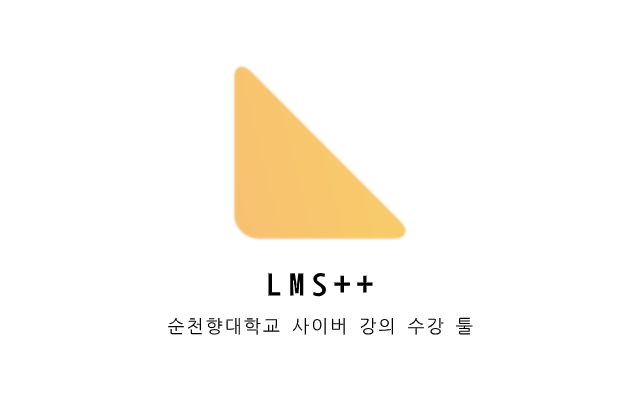
<style>
.page{position:relative;width:640px;height:400px;background:#ffffff}
.page>*{position:absolute;margin:0}
.t1{font:32px "NanumGothicCoding-Bold";letter-spacing:0.21em;color:#000000}
.t2{font:18px "NanumGothicCoding";letter-spacing:0.06em;color:#000000}
</style>
<div class="page">
<p class="t1" style="left:268px;top:273px;width:105px;height:24px">LMS++</p>
<p class="t2" style="left:168px;top:317px;width:305px;height:18px">순천향대학교 사이버 강의 수강 툴</p>
</div>
